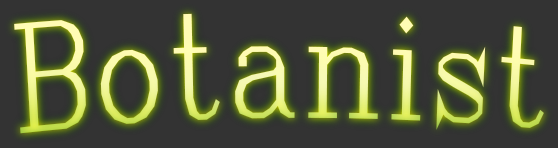
<style>
.page{position:relative;width:558px;height:148px;background:#333333}
.page>*{position:absolute;margin:0}
.t1{font:138.9px "Complex_IV25";scale:0.76 1}
</style>
<div class="page">
<p class="t1" style="left:14px;top:13px;width:530px;height:121px">Botanist</p>
</div>
